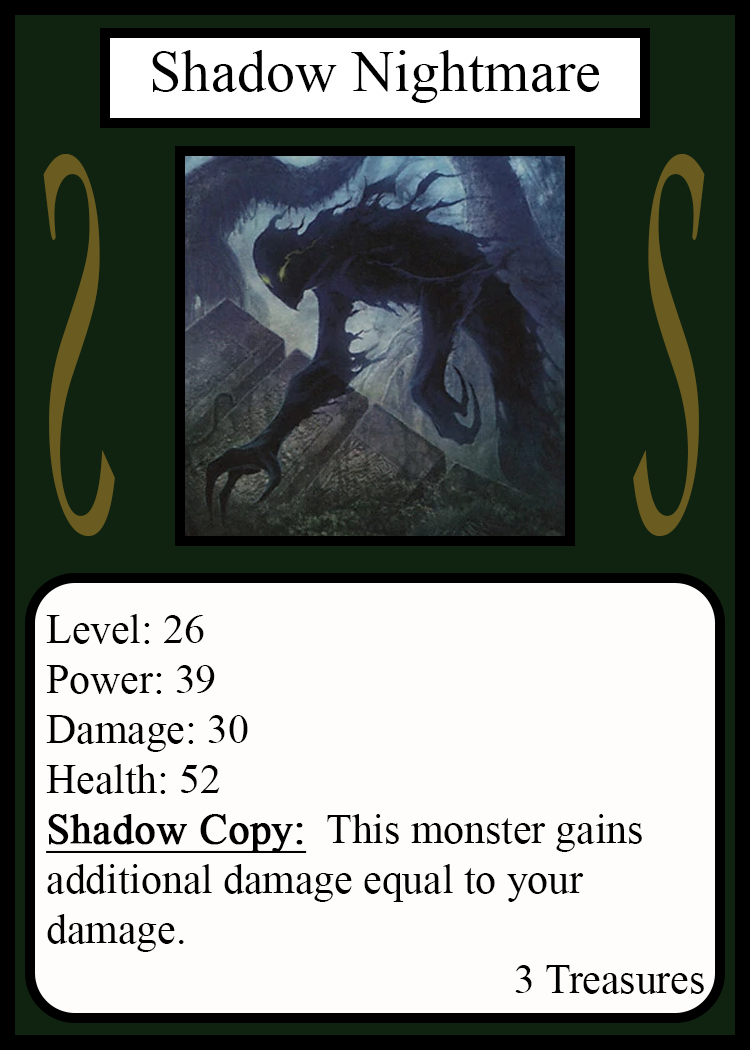
<style>
.page{position:relative;width:750px;height:1050px;background:#fffcfc}
.page>*{position:absolute;margin:0}
.t1{font:58.3px "TimesNewRomanPSMT";color:#010101}
.t2{font:548.5px "Apple-Chancery";color:#6a5c21;scale:0.27 1}
.t3{font:548.2px "Apple-Chancery";color:#6a5c21;scale:0.27 1}
.t4{font:41.7px "TimesNewRomanPSMT";color:#000000}
.t5{font:41.7px "TimesNewRomanPSMT";color:#000000;font-weight:bold;text-decoration:underline}
</style>
<div class="page">
<p class="t1" style="left:152px;top:50px;width:448px;height:53px">Shadow Nightmare</p>
<p class="t2" style="left:43px;top:154px;width:72px;height:382px;rotate:180deg">S</p>
<p class="t3" style="left:633px;top:154px;width:72px;height:382px">S</p>
<p class="t4" style="left:46px;top:614px;width:658px;height:380px">Level: 26<br>Power: 39<br>Damage: 30<br>Health: 52<br><span class="t5">Shadow Copy:</span>  This monster gains<br>additional damage equal to your<br>damage.<br>             3 Treasures</p>
</div>
